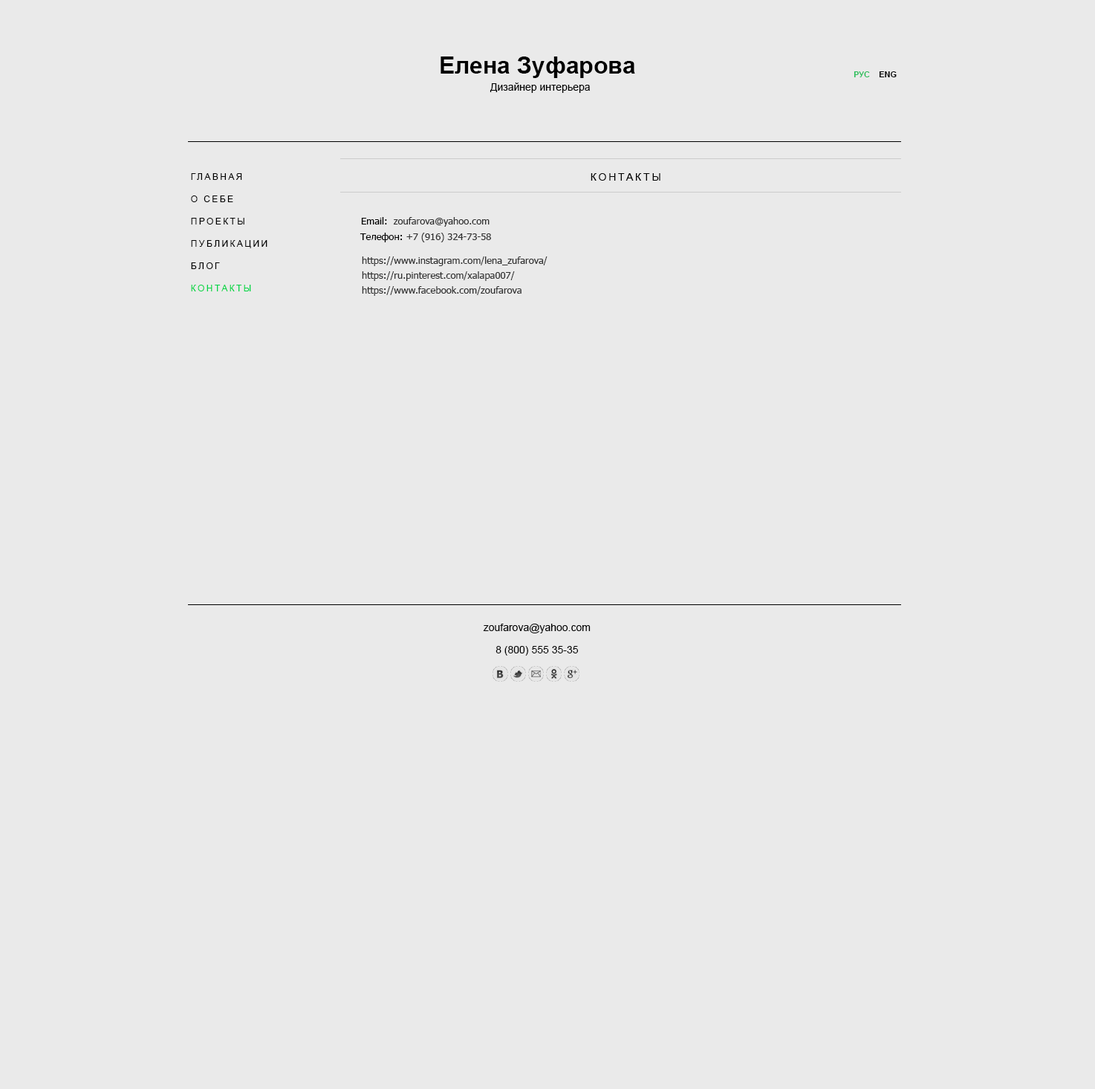
<style>
.page{position:relative;width:1095px;height:1089px;background:#eaeaea}
.page>*{position:absolute;margin:0}
.t1{font:23.8px "Arial-BoldMT";color:#000000}
.t2{font:8.2px "Arial-BoldMT";color:#2cbf5c}
.t3{font:8.2px "Arial-BoldMT";color:#000000}
.t4{font:10.4px "ArialMT";color:#000000}
.t5{font:8.9px/22.3px "ArialMT";letter-spacing:0.2em;color:#000000}
.t6{font:8.9px/22.3px "ArialMT";letter-spacing:0.2em;color:#00d646}
.t7{font:10.4px "ArialMT";letter-spacing:0.2em;color:#000000;text-transform:uppercase}
.t8{font:9.7px "Tahoma";color:#313131}
.t9{font:9.7px "Tahoma";color:#000000}
.t10{font:9.7px/14.9px "Tahoma";color:#313131}
.t11{font:10.4px/22.3px "ArialMT";color:#000000}
</style>
<div class="page">
<p class="t1" style="left:441px;top:56px;width:194px;height:22px">Елена Зуфарова</p>
<p class="t2" style="left:854px;top:71px;width:43px;height:6px">РУС    <span class="t3">ENG</span></p>
<p class="t4" style="left:490px;top:82px;width:100px;height:11px">Дизайнер интерьера</p>
<p class="t5" style="left:191px;top:173px;width:77px;height:118px">ГЛАВНАЯ<br>О СЕБЕ<br>ПРОЕКТЫ<br>ПУБЛИКАЦИИ<br>БЛОГ<br><span class="t6">КОНТАКТЫ</span></p>
<p class="t7" style="left:591px;top:173px;width:70px;height:8px">Контакты</p>
<p class="t8" style="left:361px;top:217px;width:129px;height:10px"><span class="t9">Email:  </span>zoufarova@yahoo.com</p>
<p class="t8" style="left:360px;top:233px;width:131px;height:9px"><span class="t9">Телефон: </span>+7 (916) 324-73-58</p>
<p class="t10" style="left:362px;top:256px;width:186px;height:40px">https://www.instagram.com/lena_zufarova/<br>https://ru.pinterest.com/xalapa007/<br>https://www.facebook.com/zoufarova</p>
<p class="t11" style="left:483px;top:623px;width:108px;height:32px;text-align:center">zoufarova@yahoo.com<br>8 (800) 555 35-35</p>
</div>
